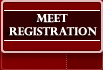
<style>
.page{position:relative;width:103px;height:70px;background:#7c0000}
.page>*{position:absolute;margin:0}
.t1{font:11px "PerpetuaTitlingMT-Bold";color:#ffffff}
.t2{font:11px "Tahoma";color:#ffffff}
</style>
<div class="page">
<p class="t1" style="left:9px;top:13px;width:88px;height:23px"><span class="t2">        </span>MEET <br>registration</p>
</div>
